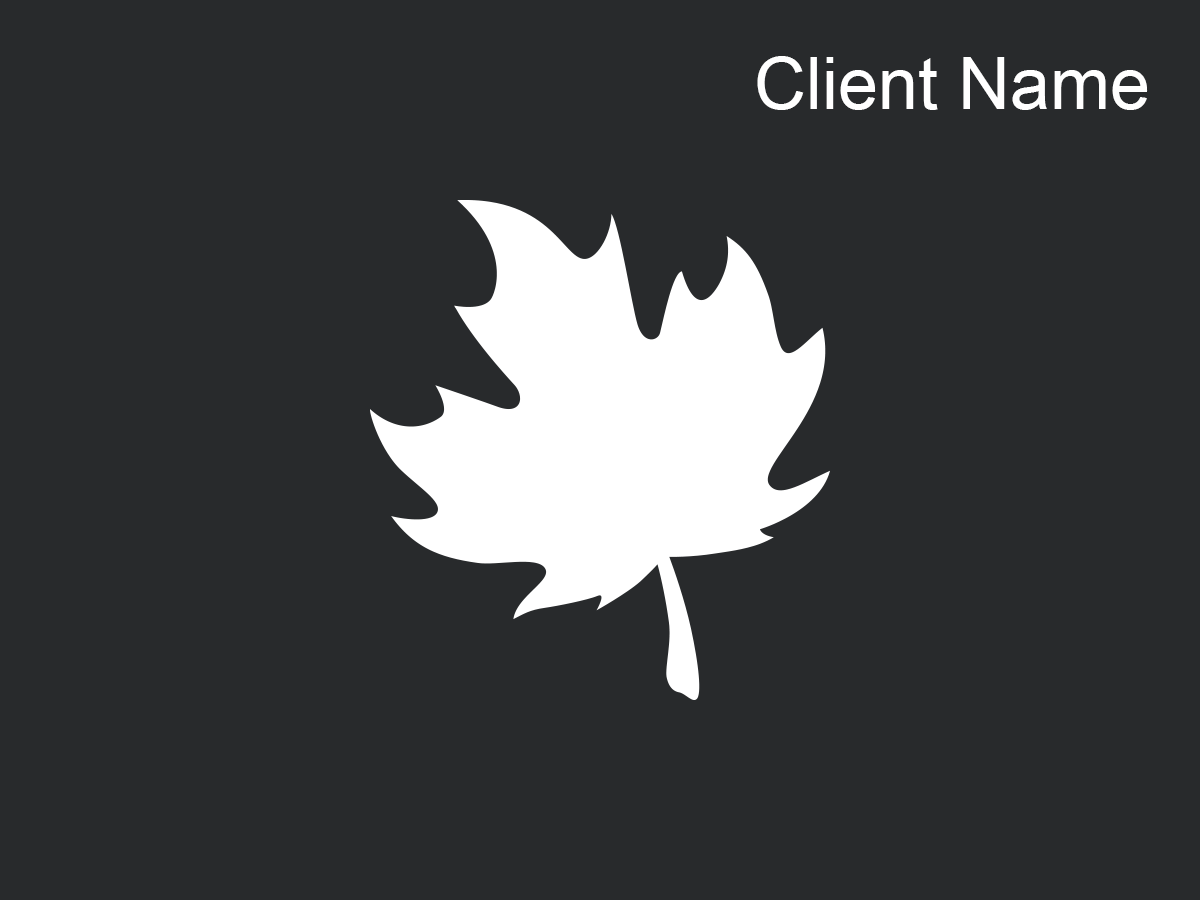
<style>
.page{position:relative;width:1200px;height:900px;background:#282a2c}
.page>*{position:absolute;margin:0}
.t1{font:72px "ArialMT";color:#ffffff}
</style>
<div class="page">
<p class="t1" style="left:757px;top:56px;width:391px;height:54px">Client Name</p>
</div>
